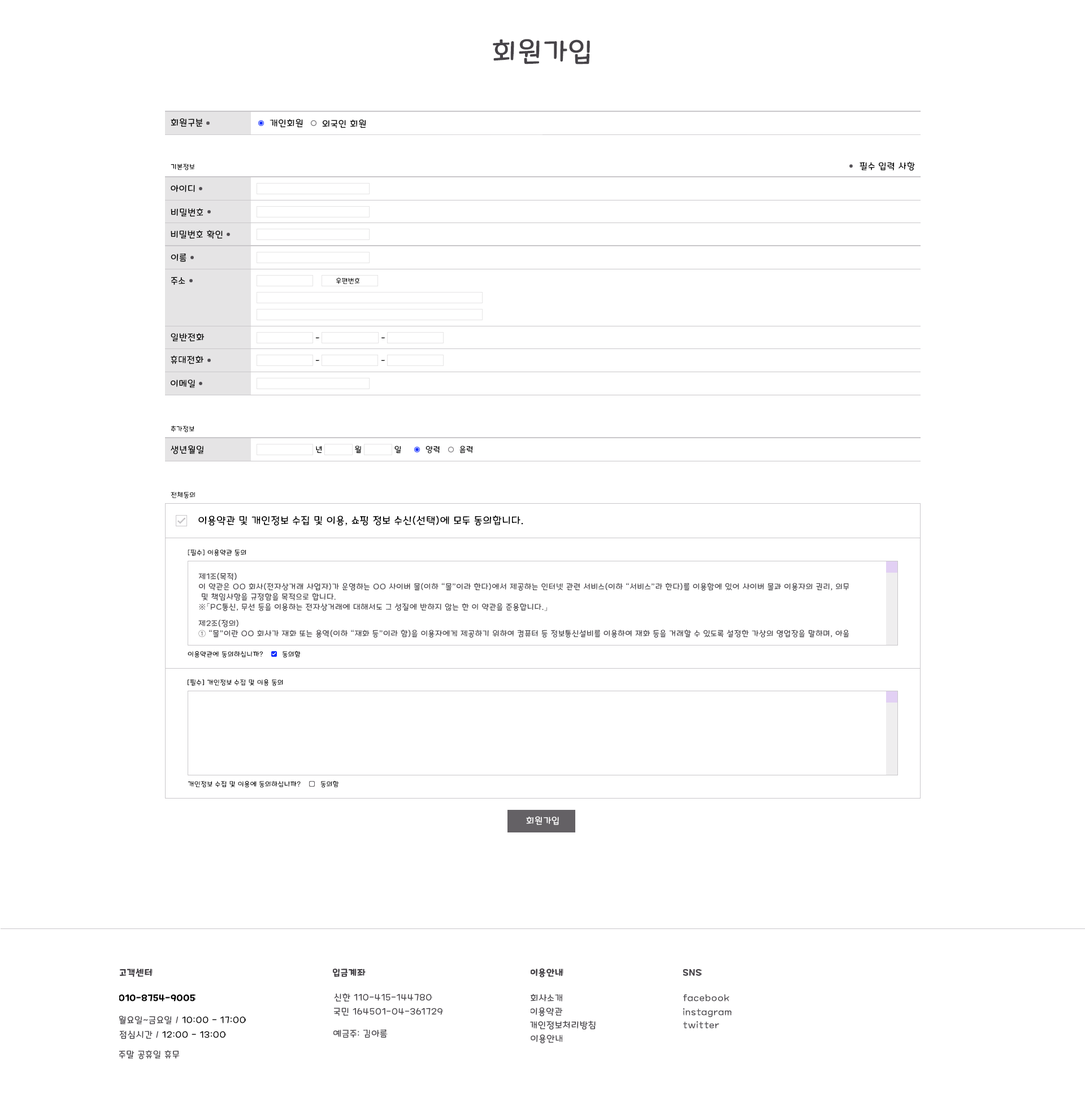
<style>
.page{position:relative;width:1085px;height:1099px;background:#ffffff}
.page>*{position:absolute;margin:0}
.t1{font:27.1px "MaplestoryLight";letter-spacing:0.06em;color:#464348}
.t2{font:9px "MaplestoryLight";letter-spacing:0.06em;color:#000000}
.t3{font:6.8px "MaplestoryLight";letter-spacing:0.06em;color:#000000}
.t4{font:7.9px "MaplestoryLight";letter-spacing:0.06em;color:#000000}
.t5{font:10.2px "MaplestoryLight";letter-spacing:0.06em;color:#000000}
.t6{font:7.9px/10.2px "MaplestoryLight";letter-spacing:0.06em;color:#464348}
.t7{font:9px "MaplestoryLight";letter-spacing:0.06em;color:#ffffff}
.t8{font:9px "MaplestoryBold";letter-spacing:0.06em;color:#464348}
.t9{font:9px "MaplestoryBold";letter-spacing:0.06em;color:#000000}
.t10{font:9px "MaplestoryLight";letter-spacing:0.06em;color:#464348}
</style>
<div class="page">
<p class="t1" style="left:493px;top:39px;width:97px;height:25px">회원가입</p>
<p class="t2" style="left:171px;top:118px;width:32px;height:9px">회원구분</p>
<p class="t2" style="left:269px;top:119px;width:34px;height:9px">개인회원</p>
<p class="t2" style="left:322px;top:119px;width:44px;height:9px">외국인 회원</p>
<p class="t2" style="left:859px;top:162px;width:56px;height:9px">필수 입력 사항</p>
<p class="t3" style="left:171px;top:164px;width:23px;height:7px">기본정보</p>
<p class="t2" style="left:171px;top:185px;width:24px;height:7px">아이디</p>
<p class="t2" style="left:171px;top:208px;width:32px;height:9px">비밀번호</p>
<p class="t2" style="left:171px;top:230px;width:52px;height:9px">비밀번호 확인</p>
<p class="t2" style="left:171px;top:254px;width:15px;height:8px">이름</p>
<p class="t2" style="left:171px;top:277px;width:14px;height:8px">주소</p>
<p class="t3" style="left:336px;top:277px;width:24px;height:7px">우편번호</p>
<p class="t2" style="left:171px;top:333px;width:34px;height:9px">일반전화</p>
<p class="t4" style="left:315px;top:337px;width:4px;height:1px">-</p>
<p class="t4" style="left:381px;top:337px;width:4px;height:1px">-</p>
<p class="t2" style="left:171px;top:355px;width:32px;height:9px">휴대전화</p>
<p class="t4" style="left:315px;top:360px;width:4px;height:1px">-</p>
<p class="t4" style="left:381px;top:360px;width:4px;height:1px">-</p>
<p class="t2" style="left:171px;top:380px;width:24px;height:8px">이메일</p>
<p class="t3" style="left:171px;top:425px;width:23px;height:8px">추가정보</p>
<p class="t2" style="left:171px;top:445px;width:32px;height:9px">생년월일</p>
<p class="t4" style="left:316px;top:446px;width:5px;height:7px">년</p>
<p class="t4" style="left:355px;top:446px;width:6px;height:8px">월</p>
<p class="t4" style="left:394px;top:446px;width:7px;height:8px">일</p>
<p class="t4" style="left:425px;top:446px;width:15px;height:8px">양력</p>
<p class="t4" style="left:459px;top:446px;width:13px;height:8px">음력</p>
<p class="t3" style="left:171px;top:491px;width:24px;height:8px">전체동의</p>
<p class="t5" style="left:198px;top:515px;width:325px;height:11px">이용약관 및 개인정보 수집 및 이용, 쇼핑 정보 수신(선택)에 모두 동의합니다.</p>
<p class="t3" style="left:188px;top:550px;width:58px;height:6px">[필수] 이용약관 동의</p>
<p class="t6" style="left:198px;top:573px;width:651px;height:38px">제1조(목적)<br>이 약관은 OO 회사(전자상거래 사업자)가 운영하는 OO 사이버 몰(이하 “몰”이라 한다)에서 제공하는 인터넷 관련 서비스(이하 “서비스”라 한다)를 이용함에 있어 사이버 몰과 이용자의 권리, 의무<br> 및 책임사항을 규정함을 목적으로 합니다.<br>※「PC통신, 무선 등을 이용하는 전자상거래에 대해서도 그 성질에 반하지 않는 한 이 약관을 준용합니다.」</p>
<p class="t6" style="left:198px;top:620px;width:651px;height:18px">제2조(정의)<br>① “몰”이란 OO 회사가 재화 또는 용역(이하 “재화 등”이라 함)을 이용자에게 제공하기 위하여 컴퓨터 등 정보통신설비를 이용하여 재화 등을 거래할 수 있도록 설정한 가상의 영업장을 말하며, 아울</p>
<p class="t3" style="left:188px;top:651px;width:75px;height:7px">이용약관에 동의하십니까?</p>
<p class="t3" style="left:282px;top:651px;width:19px;height:7px">동의함</p>
<p class="t3" style="left:188px;top:680px;width:95px;height:6px">[필수] 개인정보 수집 및 이용 동의</p>
<p class="t3" style="left:188px;top:781px;width:113px;height:7px">개인정보 수집 및 이용에 동의하십니까?</p>
<p class="t3" style="left:320px;top:781px;width:19px;height:7px">동의함</p>
<p class="t7" style="left:526px;top:816px;width:33px;height:9px">회원가입</p>
<p class="t8" style="left:120px;top:969px;width:33px;height:8px">고객센터</p>
<p class="t8" style="left:333px;top:969px;width:33px;height:8px">입금계좌</p>
<p class="t8" style="left:530px;top:968px;width:33px;height:10px">이용안내</p>
<p class="t8" style="left:683px;top:969px;width:19px;height:7px">SNS</p>
<p class="t9" style="left:119px;top:994px;width:76px;height:8px">010-8754-9005</p>
<p class="t10" style="left:334px;top:993px;width:98px;height:9px">신한 110-415-144780</p>
<p class="t10" style="left:530px;top:994px;width:32px;height:8px">회사소개</p>
<p class="t10" style="left:683px;top:994px;width:47px;height:8px">facebook</p>
<p class="t10" style="left:334px;top:1008px;width:109px;height:8px">국민 164501-04-361729</p>
<p class="t10" style="left:530px;top:1007px;width:33px;height:10px">이용약관</p>
<p class="t10" style="left:683px;top:1008px;width:49px;height:9px">instagram</p>
<p class="t2" style="left:119px;top:1016px;width:127px;height:9px"><span class="t10">월요일~금요일 / </span>10:00 - 17:00</p>
<p class="t10" style="left:530px;top:1021px;width:66px;height:9px">개인정보처리방침</p>
<p class="t10" style="left:683px;top:1021px;width:37px;height:8px">twitter</p>
<p class="t2" style="left:120px;top:1031px;width:106px;height:8px"><span class="t10">점심시간 / </span>12:00 - 13:00</p>
<p class="t10" style="left:333px;top:1030px;width:55px;height:8px">예금주: 김아름</p>
<p class="t10" style="left:530px;top:1034px;width:32px;height:10px">이용안내</p>
<p class="t10" style="left:119px;top:1050px;width:61px;height:10px">주말 공휴일 휴무</p>
</div>
